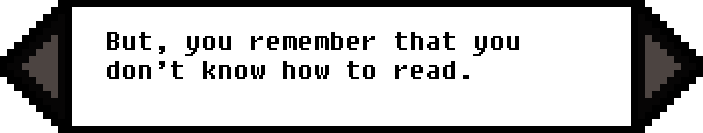
<style>
.page{position:relative;width:703px;height:133px;background:#ffffff}
.page>*{position:absolute;margin:0}
.t1{font:24px "Fixedsys";color:#000000}
</style>
<div class="page">
<p class="t1" style="left:107px;top:32px;width:412px;height:47px">But, you remember that you <br>don’t know how to read.</p>
</div>
